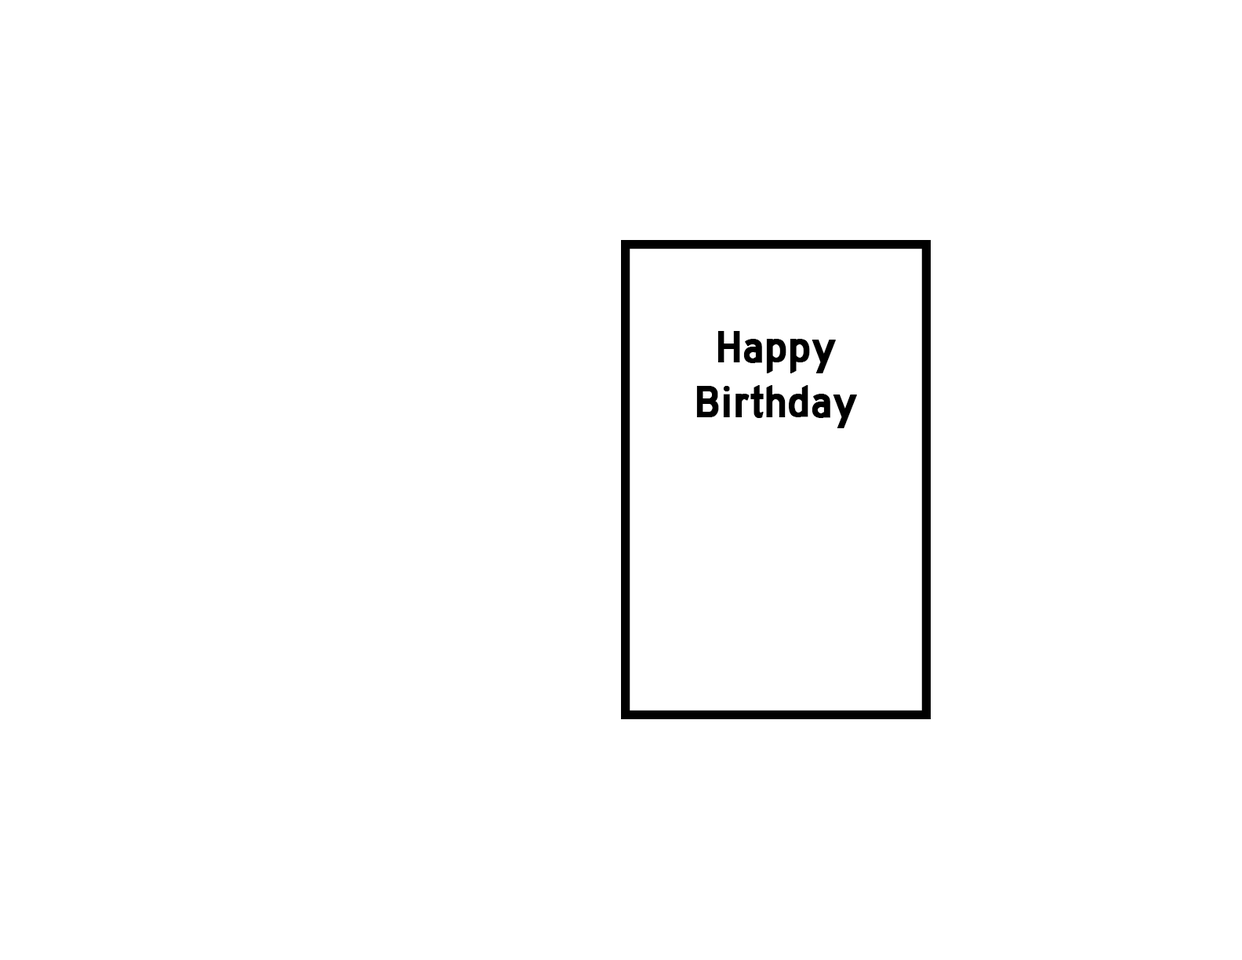
<style>
.page{position:relative;width:1242px;height:960px;background:#ffffff}
.page>*{position:absolute;margin:0}
.t1{font:45.8px "HighwayGothic";color:#000000;font-weight:bold}
</style>
<div class="page">
<p class="t1" style="left:696px;top:331px;width:161px;height:97px;text-align:center">Happy<br>Birthday</p>
</div>
